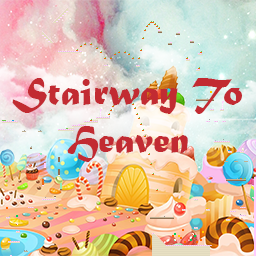
<style>
.page{position:relative;width:256px;height:256px}
.page>*{position:absolute;margin:0}
.t1{font:40px "MaturaMTScriptCapitals";color:#c22b32}
</style>
<div class="page">
<p class="t1" style="left:12px;top:78px;width:230px;height:84px;text-align:center">Stairway To<br>Heaven</p>
</div>
